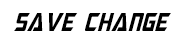
<style>
.page{position:relative;width:185px;height:43px;background:#ffffff}
.page>*{position:absolute;margin:0}
.t1{font:26px "MegatronCondensed-Italic";color:#000000}
</style>
<div class="page">
<p class="t1" style="left:14px;top:13px;width:157px;height:18px">save change</p>
</div>
